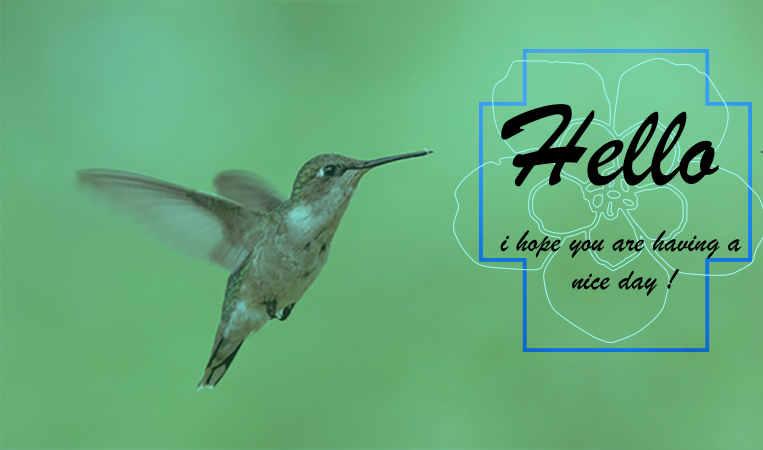
<style>
.page{position:relative;width:763px;height:450px}
.page>*{position:absolute;margin:0}
.t1{font:122.8px "BrushScriptMT";color:#000000}
.t2{font:122.8px "ChineseRocks";color:#ffffff}
.t3{font:31.9px "BrushScriptMT";color:#000000}
</style>
<div class="page">
<p class="t1" style="left:501px;top:104px;width:218px;height:83px"><span class="t2"> </span>Hello</p>
<p class="t3" style="left:500px;top:230px;width:242px;height:66px">i hope you are having a <br>        nice day !</p>
</div>
